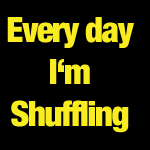
<style>
.page{position:relative;width:150px;height:150px;background:#000000}
.page>*{position:absolute;margin:0}
.t1{font:35px "HelveticaNeue-CondensedBlack";letter-spacing:-0.045em;color:#f9ec20}
</style>
<div class="page">
<p class="t1" style="left:7px;top:17px;width:127px;height:116px;text-align:center">Every day<br>I‘m<br>Shuffling</p>
</div>
